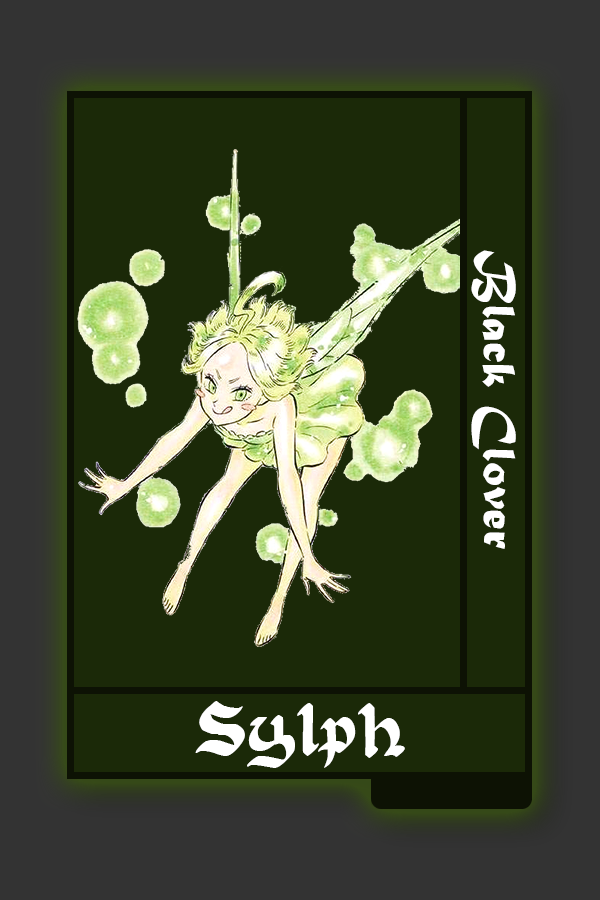
<style>
.page{position:relative;width:600px;height:900px;background:#1b2908}
.page>*{position:absolute;margin:0}
.t1{font:48.8px "MaturaMTScriptCapitals";color:#ffffff}
.t2{font:64.6px "FloranteatLaura";color:#ffffff}
</style>
<div class="page">
<p class="t1" style="left:471px;top:250px;width:45px;height:299px;rotate:90deg">Black Clover</p>
<p class="t2" style="left:195px;top:701px;width:210px;height:67px">Sylph</p>
</div>
